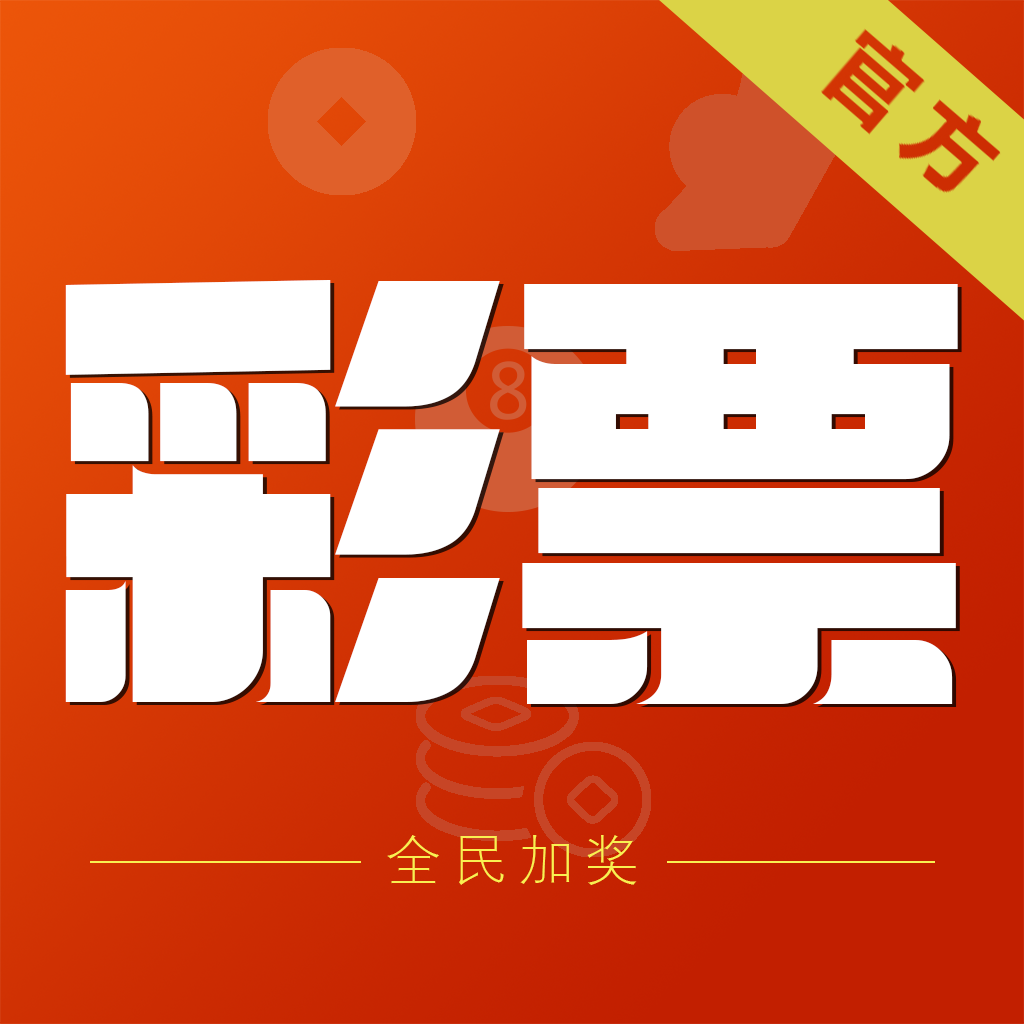
<style>
.page{position:relative;width:1024px;height:1024px;background:#ffffff}
.page>*{position:absolute;margin:0}
.t1{font:457.5px "MF-DingHei(Noncommercial)-Regular";color:#ffffff}
.t2{font:55px "DengXian-Light";letter-spacing:0.2em;color:#f9f051}
</style>
<div class="page">
<p class="t1" style="left:65px;top:280px;width:893px;height:424px">彩票</p>
<p class="t2" style="left:387px;top:835px;width:250px;height:50px">全民加奖</p>
</div>
